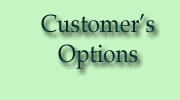
<style>
.page{position:relative;width:180px;height:100px;background:#c5f5c2}
.page>*{position:absolute;margin:0}
.t1{font:25px "BookAntiqua";color:#05332e;scale:0.9 1}
</style>
<div class="page">
<p class="t1" style="left:41px;top:13px;width:114px;height:56px;text-align:center">Customer’s<br>Options</p>
</div>
